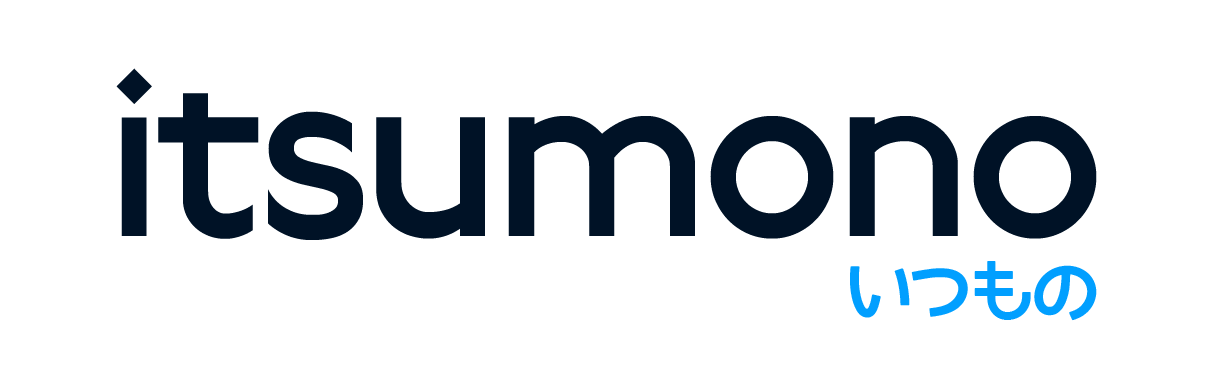
<style>
.page{position:relative;width:1210px;height:379px;background:#ffffff}
.page>*{position:absolute;margin:0}
.t1{font:250px "Railway";color:#001226}
.t2{font:66px "07YasashisaGothicBold";color:#019fff}
</style>
<div class="page">
<p class="t1" style="left:116px;top:68px;width:981px;height:172px">itsumono</p>
<p class="t2" style="left:850px;top:261px;width:247px;height:60px">いつもの</p>
<p class="t2" style="left:850px;top:261px;width:247px;height:60px">いつもの</p>
</div>
